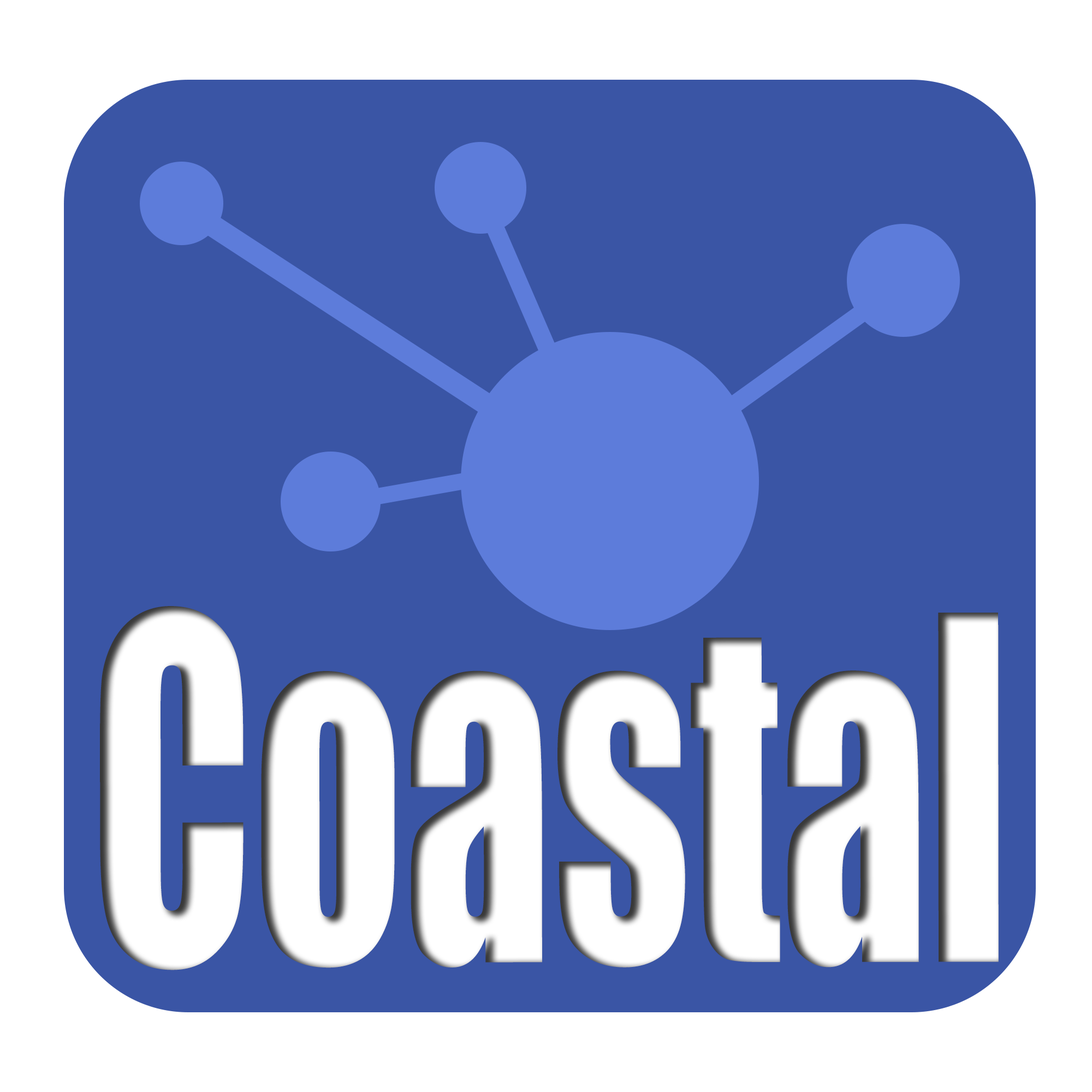
<style>
.page{position:relative;width:1092px;height:1092px;background:#3a55a5}
.page>*{position:absolute;margin:0}
.t1{font:441.5px "Impact";color:#ffffff;scale:0.67 1}
</style>
<div class="page">
<p class="t1" style="left:100px;top:606px;width:899px;height:364px">Coastal</p>
</div>
